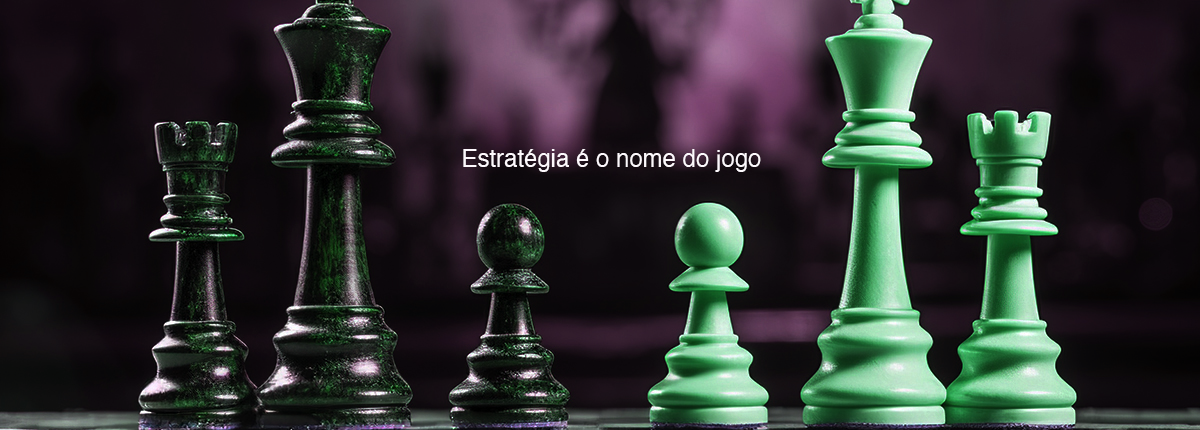
<style>
.page{position:relative;width:1200px;height:430px}
.page>*{position:absolute;margin:0}
.t1{font:24px "Helvetica";color:#fdf9fd}
</style>
<div class="page">
<p class="t1" style="left:463px;top:149px;width:298px;height:23px">Estratégia é o nome do jogo</p>
</div>
